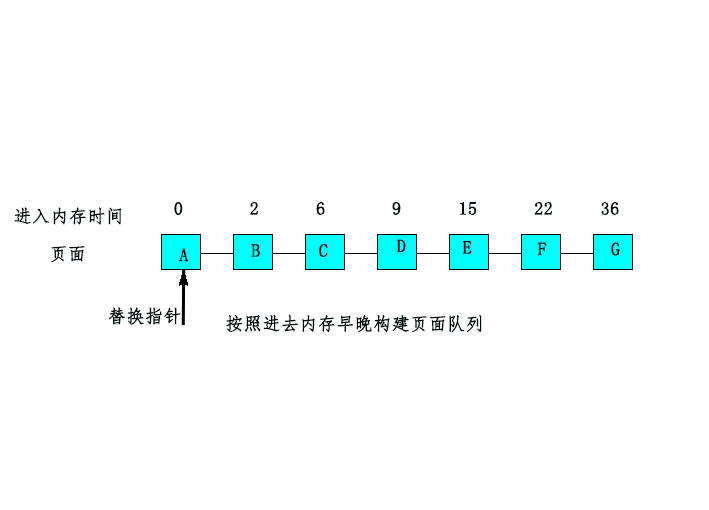
<style>
.page{position:relative;width:709px;height:510px;background:#ffffff}
.page>*{position:absolute;margin:0}
.t1{font:18px "FangSong";color:#010e0e;font-weight:bold}
</style>
<div class="page">
<p class="t1" style="left:14px;top:207px;width:108px;height:18px">进入内存时间</p>
<p class="t1" style="left:174px;top:202px;width:445px;height:13px">0       2      6       9      15      22     36</p>
<p class="t1" style="left:51px;top:246px;width:34px;height:17px">页面</p>
<p class="t1" style="left:251px;top:244px;width:9px;height:13px">B</p>
<p class="t1" style="left:319px;top:244px;width:9px;height:13px">C</p>
<p class="t1" style="left:396px;top:239px;width:10px;height:14px">D</p>
<p class="t1" style="left:462px;top:241px;width:10px;height:13px">E</p>
<p class="t1" style="left:537px;top:242px;width:10px;height:14px">F</p>
<p class="t1" style="left:611px;top:242px;width:9px;height:14px">G</p>
<p class="t1" style="left:179px;top:248px;width:10px;height:14px">A</p>
<p class="t1" style="left:108px;top:307px;width:73px;height:18px">替换指针</p>
<p class="t1" style="left:226px;top:314px;width:256px;height:19px">按照进去内存早晚构建页面队列</p>
</div>
